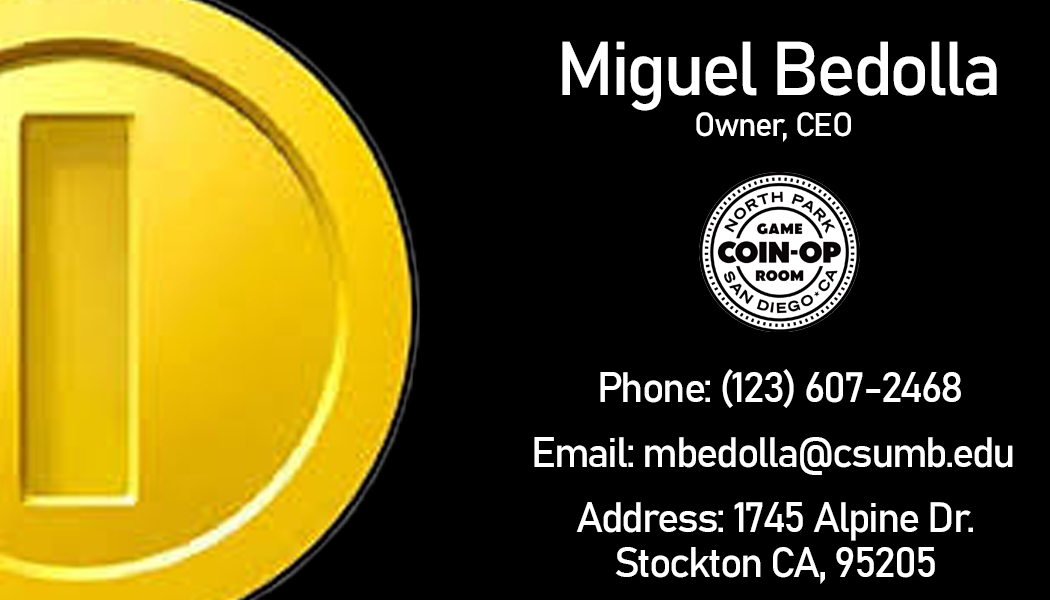
<style>
.page{position:relative;width:1050px;height:600px;background:#000000}
.page>*{position:absolute;margin:0}
.t1{font:75px "Bahnschrift";letter-spacing:-0.05em;color:#ffffff}
.t2{font:33.3px "Bahnschrift";letter-spacing:-0.05em;color:#ffffff}
.t3{font:41.7px "Bahnschrift";letter-spacing:-0.05em;color:#ffffff}
.t4{font:41.7px/45.8px "Bahnschrift";letter-spacing:-0.05em;color:#ffffff}
</style>
<div class="page">
<p class="t1" style="left:562px;top:41px;width:435px;height:70px">Miguel Bedolla</p>
<p class="t2" style="left:696px;top:112px;width:155px;height:30px">Owner, CEO</p>
<p class="t3" style="left:600px;top:369px;width:361px;height:39px">Phone: (123) 607-2468</p>
<p class="t3" style="left:534px;top:437px;width:479px;height:38px">Email: mbedolla@csumb.edu</p>
<p class="t4" style="left:576px;top:502px;width:397px;height:82px;text-align:center">Address: 1745 Alpine Dr.<br>Stockton CA, 95205</p>
</div>
